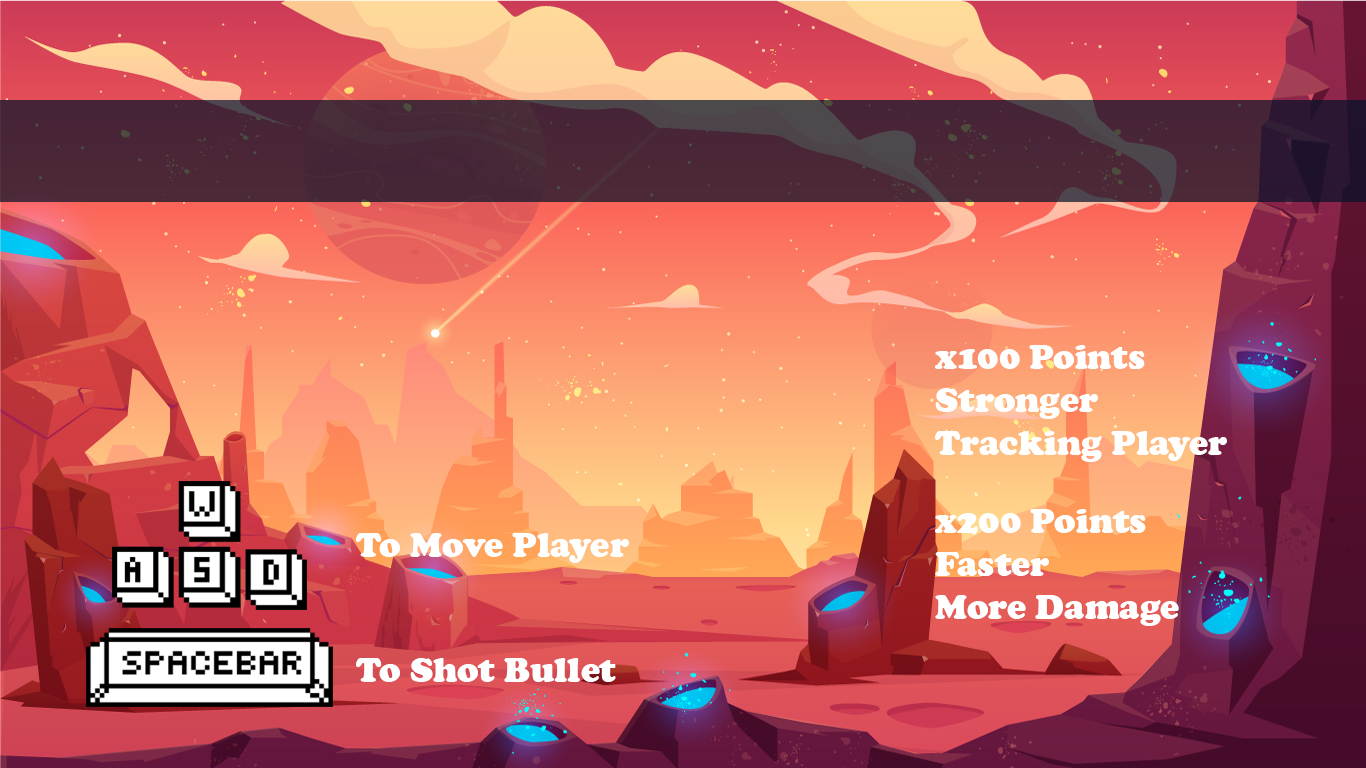
<style>
.page{position:relative;width:1366px;height:768px}
.page>*{position:absolute;margin:0}
.t1{font:36px "CooperBlack";color:#ffffff}
.t2{font:48px "CooperBlack";color:#ffffff}
</style>
<div class="page">
<p class="t1" style="left:935px;top:345px;width:292px;height:117px">x100 Points<br>Stronger<br>Tracking Player</p>
<p class="t1" style="left:935px;top:509px;width:244px;height:117px">x200 Points<br>Faster<br>More Damage</p>
<p class="t1" style="left:356px;top:533px;width:273px;height:30px;text-align:center">To Move Player<br><span class="t2">pla</span></p>
<p class="t1" style="left:356px;top:658px;width:260px;height:24px">To Shot Bullet</p>
</div>
